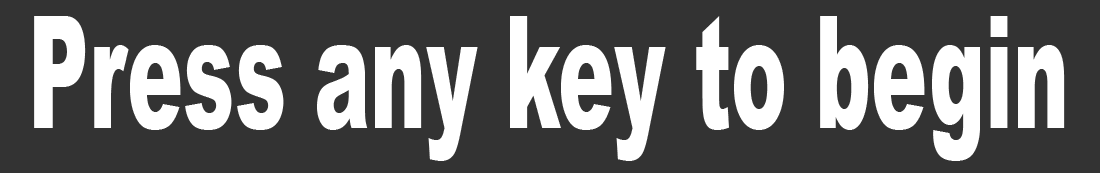
<style>
.page{position:relative;width:1100px;height:173px;background:#333333}
.page>*{position:absolute;margin:0}
.t1{font:156px "Arial-Black";color:#ffffff;scale:0.54 1}
</style>
<div class="page">
<p class="t1" style="left:34px;top:16px;width:1031px;height:145px">Press any key to begin</p>
</div>
